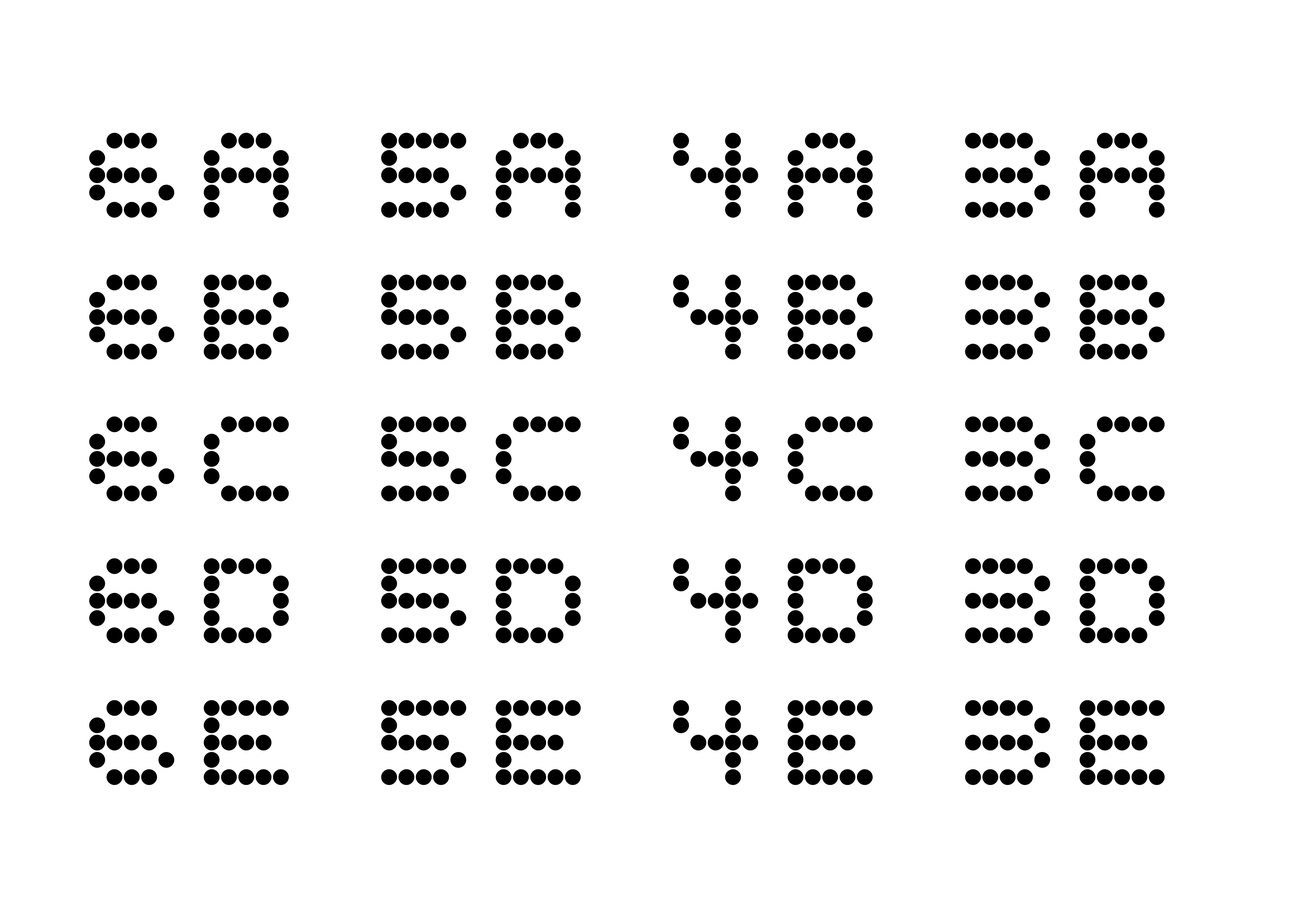
<style>
.page{position:relative;width:1299px;height:918px;background:#ffffff}
.page>*{position:absolute;margin:0}
.t1{font:84px "PerforationStrip";color:#000000}
</style>
<div class="page">
<p class="t1" style="left:89px;top:133px;width:200px;height:85px">6A</p>
<p class="t1" style="left:381px;top:133px;width:200px;height:85px">5A</p>
<p class="t1" style="left:673px;top:133px;width:199px;height:85px">4A</p>
<p class="t1" style="left:965px;top:133px;width:199px;height:85px">3A</p>
<p class="t1" style="left:89px;top:275px;width:200px;height:85px">6B</p>
<p class="t1" style="left:381px;top:275px;width:200px;height:85px">5B</p>
<p class="t1" style="left:673px;top:275px;width:199px;height:85px">4B</p>
<p class="t1" style="left:965px;top:275px;width:199px;height:85px">3B</p>
<p class="t1" style="left:89px;top:416px;width:200px;height:86px">6C</p>
<p class="t1" style="left:381px;top:416px;width:200px;height:86px">5C</p>
<p class="t1" style="left:673px;top:416px;width:199px;height:86px">4C</p>
<p class="t1" style="left:965px;top:416px;width:199px;height:86px">3C</p>
<p class="t1" style="left:89px;top:558px;width:200px;height:85px">6D</p>
<p class="t1" style="left:381px;top:558px;width:200px;height:85px">5D</p>
<p class="t1" style="left:673px;top:558px;width:199px;height:85px">4D</p>
<p class="t1" style="left:965px;top:558px;width:199px;height:85px">3D</p>
<p class="t1" style="left:89px;top:700px;width:200px;height:85px">6E</p>
<p class="t1" style="left:381px;top:700px;width:200px;height:85px">5E</p>
<p class="t1" style="left:673px;top:700px;width:199px;height:85px">4E</p>
<p class="t1" style="left:965px;top:700px;width:199px;height:85px">3E</p>
</div>
